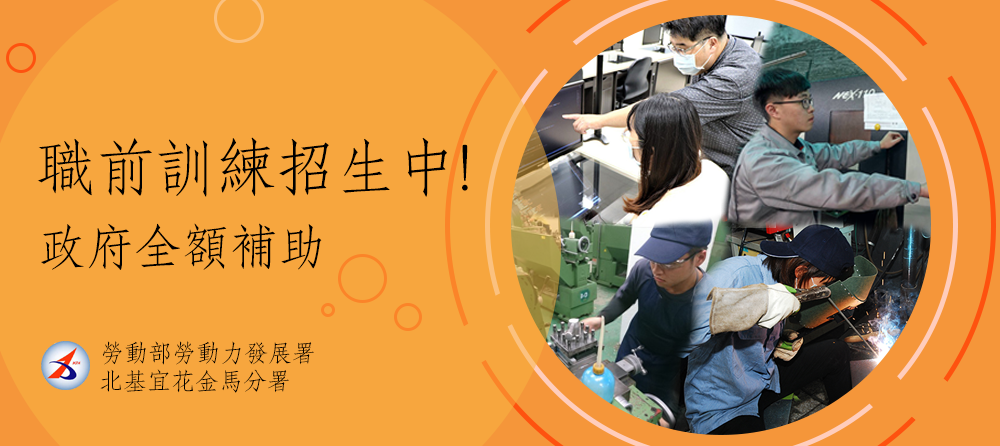
<style>
.page{position:relative;width:1000px;height:446px;background:#f7a63e}
.page>*{position:absolute;margin:0}
.t1{font:60px "AdobeFangsongStd-Regular";color:#000000}
.t2{font:48px "AdobeFangsongStd-Regular";color:#000000}
.t3{font:24px "AdobeFangsongStd-Regular";color:#000000}
</style>
<div class="page">
<p class="t1" style="left:37px;top:137px;width:431px;height:60px">職前訓練招生中!</p>
<p class="t2" style="left:41px;top:223px;width:281px;height:47px">政府全額補助</p>
<p class="t3" style="left:102px;top:341px;width:212px;height:24px">勞動部勞動力發展署</p>
<p class="t3" style="left:100px;top:369px;width:189px;height:24px">北基宜花金馬分署</p>
</div>
